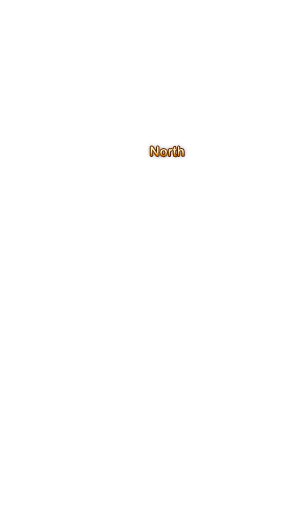
<style>
.page{position:relative;width:283px;height:513px;background:#ffffff}
.page>*{position:absolute;margin:0}
.t1{font:13px "ArialMT";letter-spacing:0.05em}
</style>
<div class="page">
<p class="t1" style="left:150px;top:146px;width:34px;height:11px">North</p>
</div>
